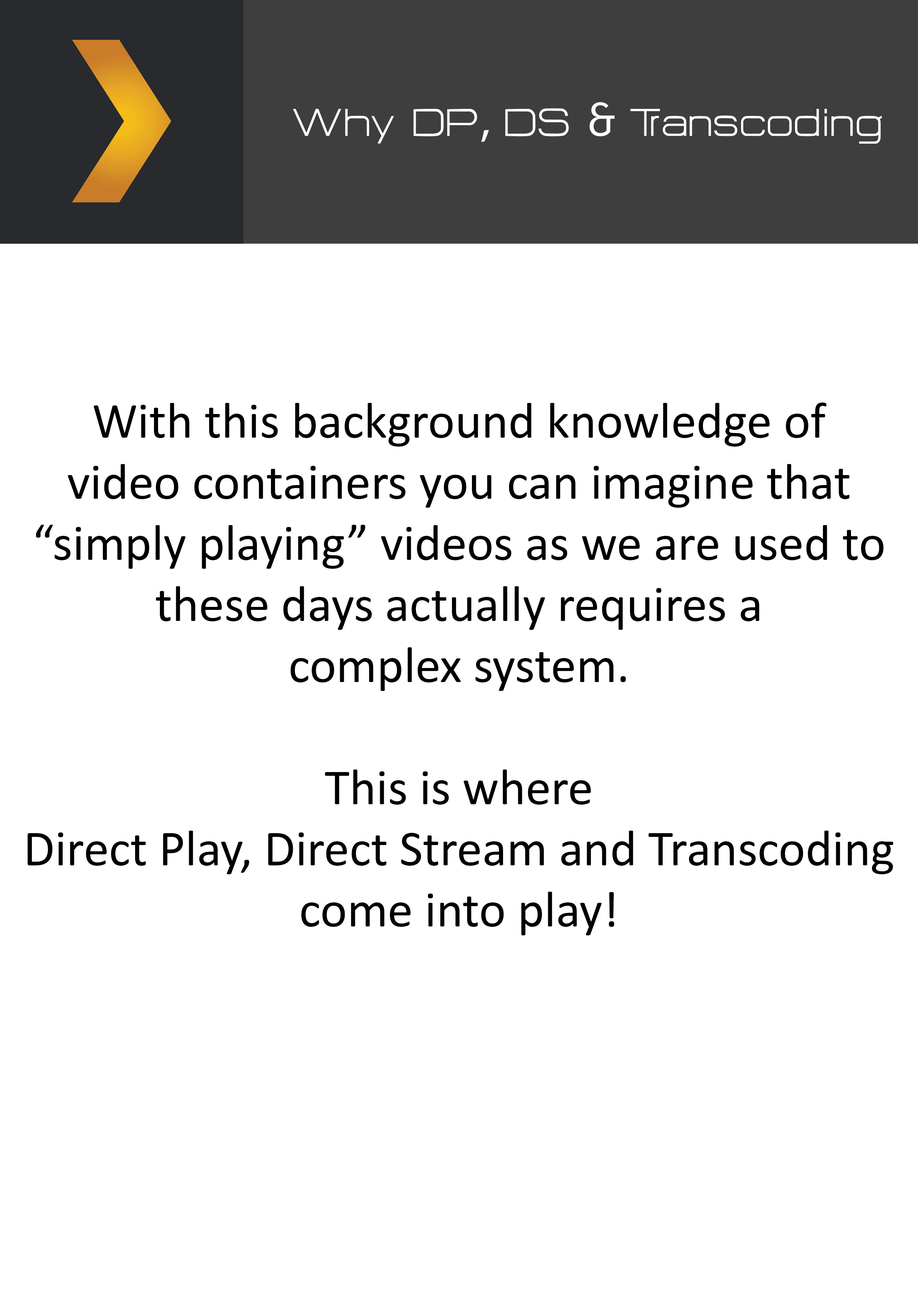
<style>
.page{position:relative;width:918px;height:1299px;background:#ffffff}
.page>*{position:absolute;margin:0}
.t1{font:47.8px "HURTMOLDPersonalUse-Regular";color:#ffffff}
.t2{font:47.8px "MyriadPro-Regular";color:#ffffff}
.t3{font:47.8px "FiraCode-Regular";color:#ffffff}
.t4{font:50.9px "Calibri";color:#000000}
</style>
<div class="page">
<p class="t1" style="left:293px;top:102px;width:589px;height:42px">Why DP<span class="t2">,</span> DS <span class="t3">&amp;</span> Transcoding</p>
<p class="t4" style="left:27px;top:402px;width:866px;height:533px;text-align:center">With this background knowledge of<br>video containers you can imagine that<br>“simply playing” videos as we are used to<br>these days actually requires a<br>complex system.<br><br>This is where<br>Direct Play, Direct Stream and Transcoding<br>come into play!</p>
</div>
